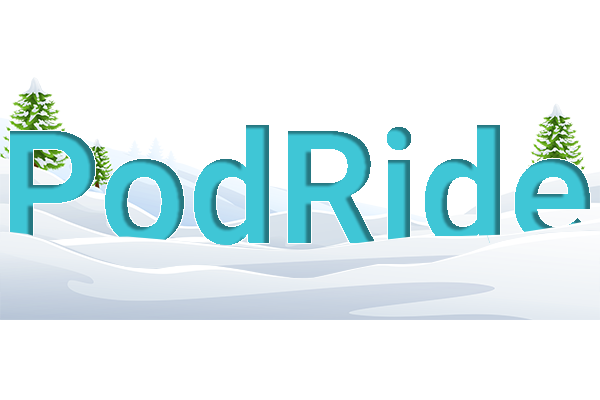
<style>
.page{position:relative;width:600px;height:400px;background:#ffffff}
.page>*{position:absolute;margin:0}
.t1{font:157.2px "Roboto-Bold";color:#3fc6d6}
</style>
<div class="page">
<p class="t1" style="left:10px;top:125px;width:580px;height:120px">PodRide</p>
</div>
